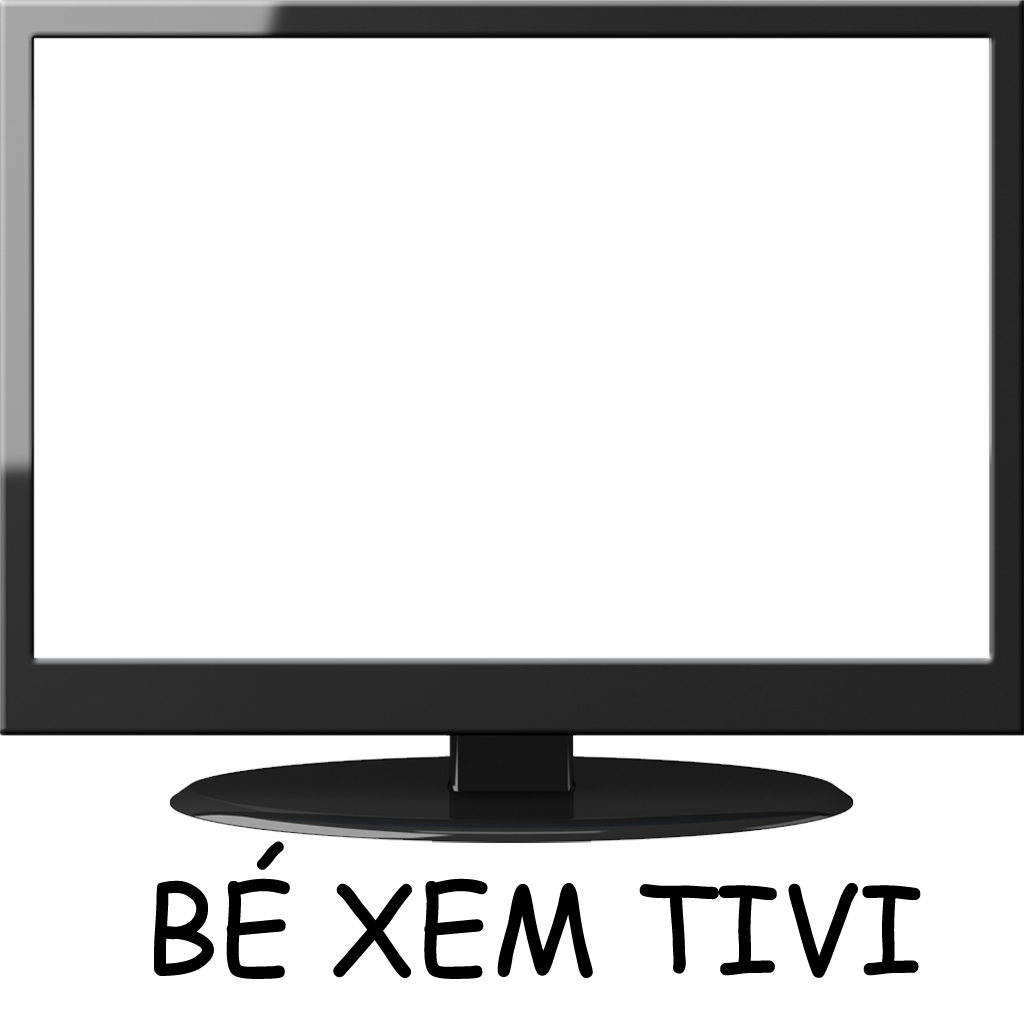
<style>
.page{position:relative;width:1024px;height:1024px;background:#ffffff}
.page>*{position:absolute;margin:0}
.t1{font:120px "ComicSansMS";color:#000000}
</style>
<div class="page">
<p class="t1" style="left:154px;top:841px;width:767px;height:138px">BÉ XEM TIVI</p>
</div>
